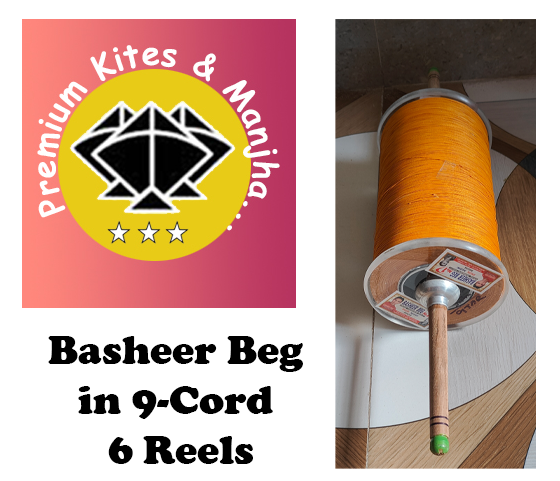
<style>
.page{position:relative;width:560px;height:481px;background:#ffffff}
.page>*{position:absolute;margin:0}
.t1{font:41.7px "CooperBlack";color:#000000}
</style>
<div class="page">
<p class="t1" style="left:48px;top:336px;width:255px;height:128px;text-align:center">Basheer Beg<br>in 9-Cord<br> 6 Reels</p>
</div>
